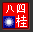
<style>
.page{position:relative;width:33px;height:32px;background:#f20000}
.page>*{position:absolute;margin:0}
.t1{font:10.4px "SimSun";color:#ffffff}
.t2{font:11.7px "SimSun";color:#ffffff}
</style>
<div class="page">
<p class="t1" style="left:6px;top:4px;width:19px;height:9px">八四</p>
<p class="t2" style="left:16px;top:15px;width:11px;height:12px">桂</p>
</div>
